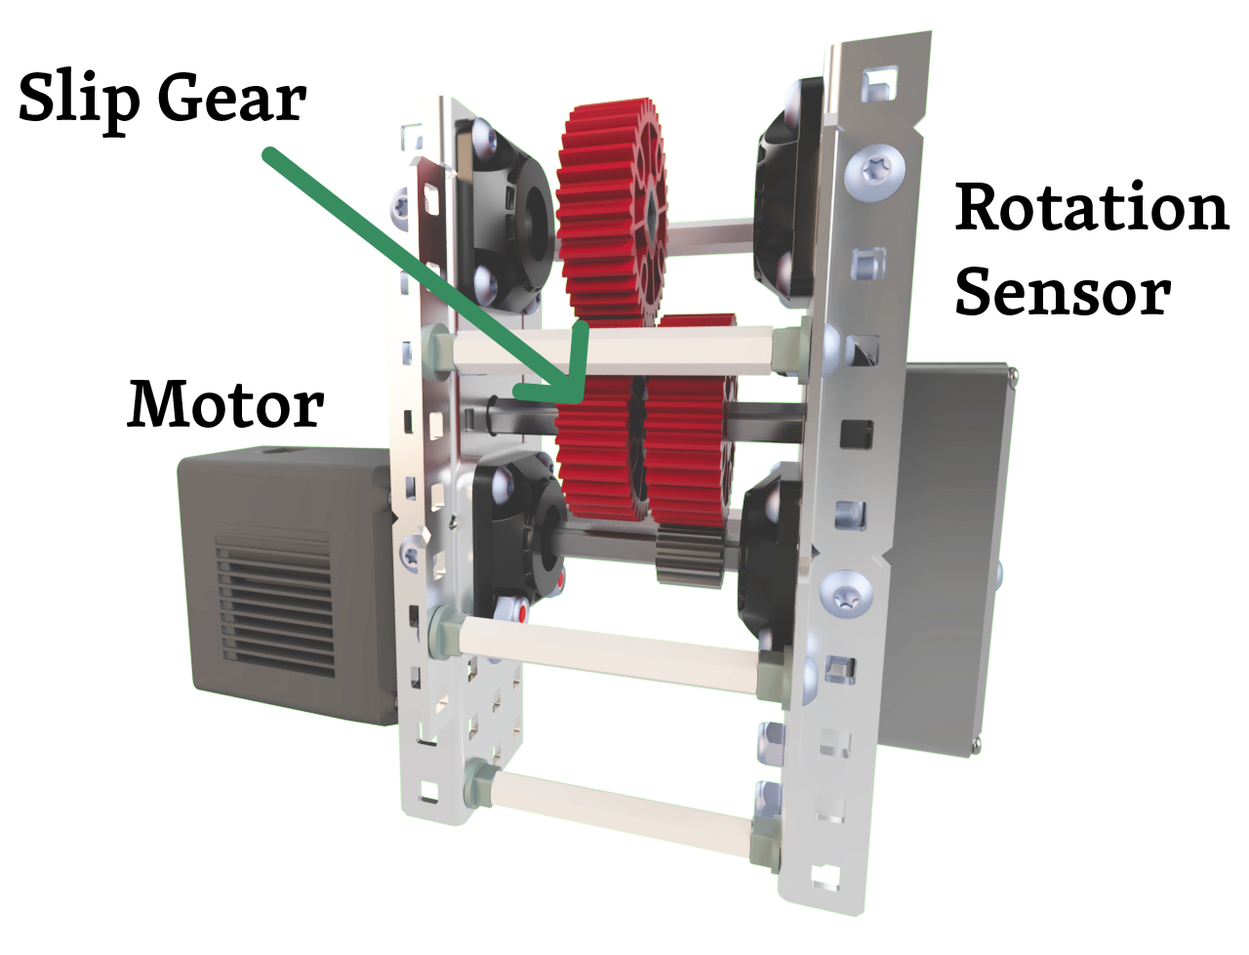
<style>
.page{position:relative;width:1249px;height:955px;background:#ffffff}
.page>*{position:absolute;margin:0}
.t1{font:70.3px "SkolarLatin-Semibold";color:#000000}
</style>
<div class="page">
<p class="t1" style="left:20px;top:66px;width:286px;height:72px">Slip Gear</p>
<p class="t1" style="left:955px;top:179px;width:276px;height:136px">Rotation<br>Sensor</p>
<p class="t1" style="left:127px;top:380px;width:197px;height:47px">Motor</p>
</div>
